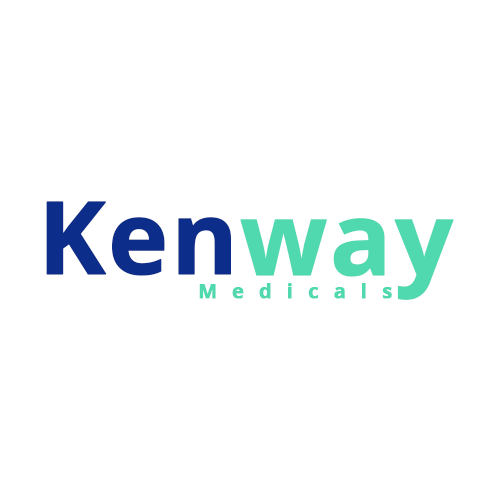
<style>
.page{position:relative;width:500px;height:500px;background:#ffffff}
.page>*{position:absolute;margin:0}
.t1{font:100.9px "OpenSans-Bold";color:#0c2e8a;font-weight:bold}
.t2{font:100.9px "OpenSans-Bold";color:#50d8af;font-weight:bold}
.t3{font:19.6px "OpenSans-Bold";letter-spacing:0.76em;color:#50d8af;font-weight:bold}
</style>
<div class="page">
<p class="t1" style="left:46px;top:201px;width:185px;height:75px">Ken</p>
<p class="t2" style="left:240px;top:218px;width:214px;height:82px">way</p>
<p class="t3" style="left:199px;top:283px;width:193px;height:16px">Medicals</p>
</div>
